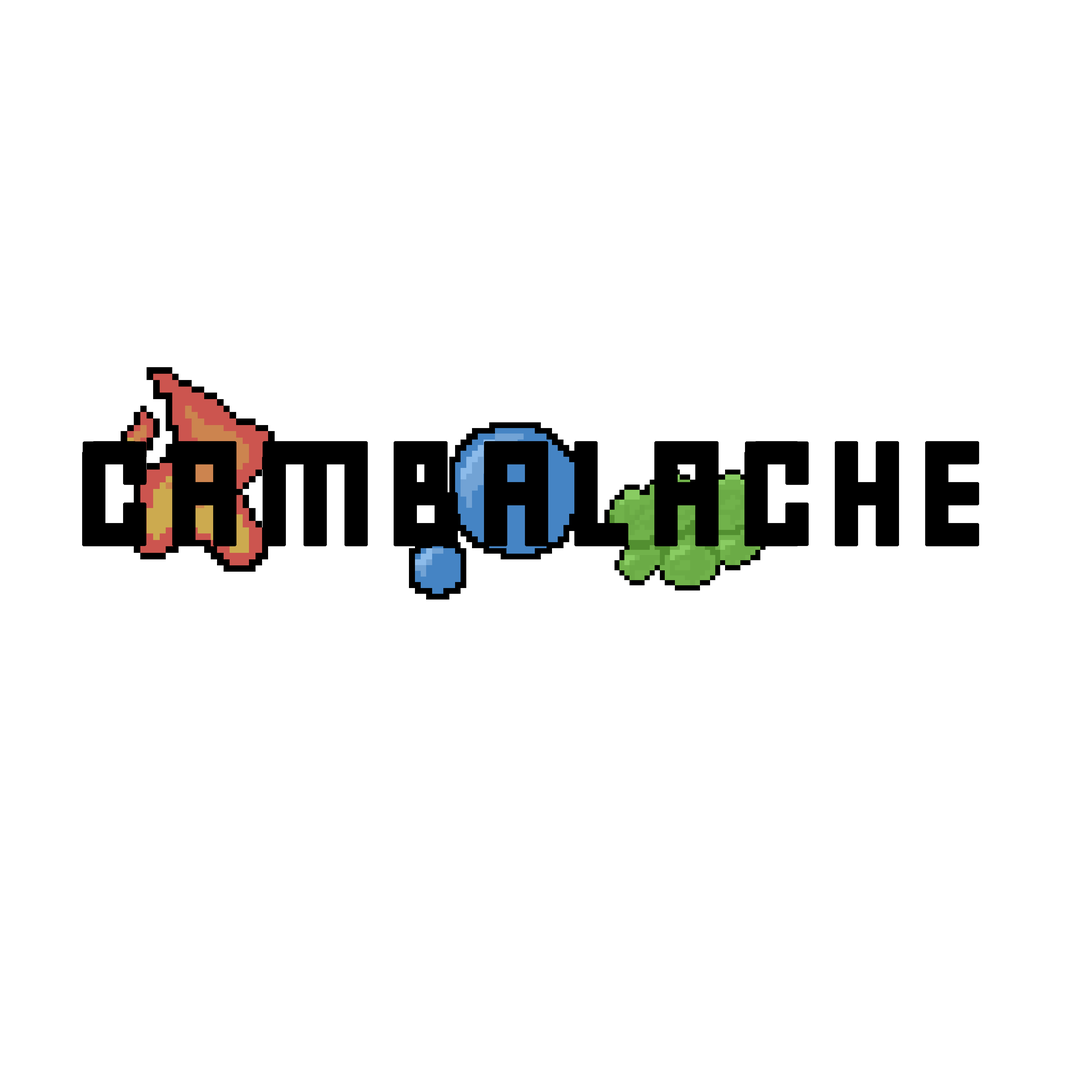
<style>
.page{position:relative;width:1092px;height:1092px;background:#ffffff}
.page>*{position:absolute;margin:0}
.t1{font:81.9px "FFFForward";letter-spacing:0.2em;color:#000000;font-weight:bold}
</style>
<div class="page">
<p class="t1" style="left:82px;top:441px;width:897px;height:106px">CAMBALACHE</p>
</div>
